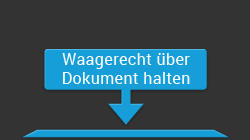
<style>
.page{position:relative;width:250px;height:140px;background:#333333}
.page>*{position:absolute;margin:0}
.t1{font:16px/19px "Roboto-Regular";letter-spacing:0.025em;color:#ffffff}
</style>
<div class="page">
<p class="t1" style="left:62px;top:53px;width:128px;height:31px;text-align:center">Waagerecht über<br>Dokument halten</p>
</div>
